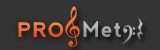
<style>
.page{position:relative;width:160px;height:50px;background:#333333}
.page>*{position:absolute;margin:0}
.t1{font:24px/0px "Guitar-Pro-5";letter-spacing:0.075em}
.t2{font:20px "nevis-Bold";letter-spacing:0.075em}
.t3{font:22px "nevis-Bold";letter-spacing:0.075em;color:#abaaaa;scale:0.91 1}
.t4{font:22px "nevis-Bold";letter-spacing:0.8em;color:#abaaaa;scale:0.91 1}
.t5{font:31.2px "Guitar-Pro-5";letter-spacing:0.075em;color:#abaaaa;scale:0.77 1}
.t6{font:23.4px "Guitar-Pro-5";letter-spacing:0.075em;color:#b3b3b3;scale:0.77 1}
</style>
<div class="page">
<p class="t1" style="left:65px;top:6px;width:15px;height:42px">:</p>
<p class="t2" style="left:18px;top:22px;width:45px;height:15px">PRO</p>
<p class="t3" style="left:83px;top:18px;width:60px;height:21px">Me<span class="t4">t</span><span class="t5">P</span></p>
<p class="t6" style="left:122px;top:25px;width:14px;height:19px">;</p>
</div>
